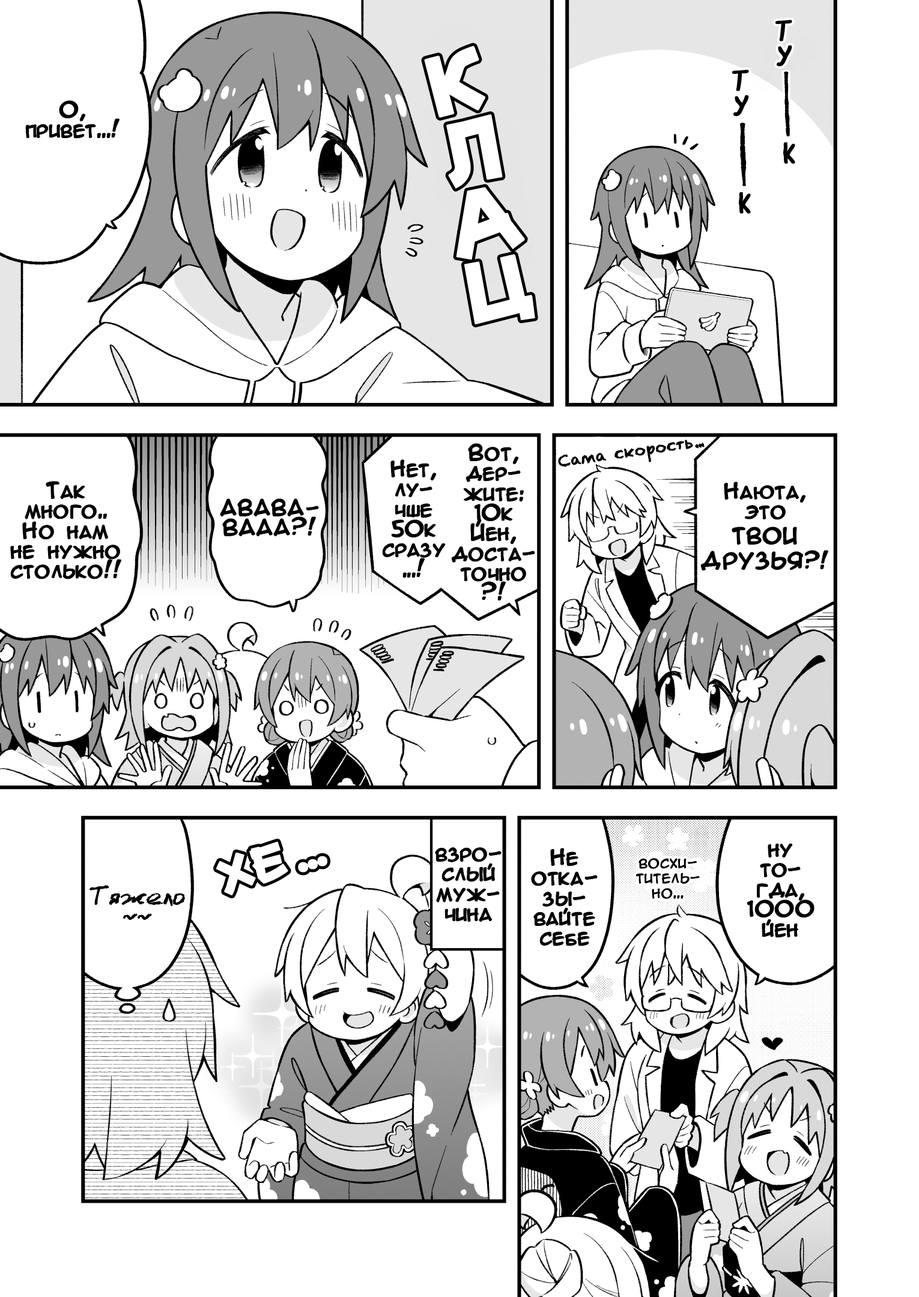
<style>
.page{position:relative;width:919px;height:1297px;background:#ffffff}
.page>*{position:absolute;margin:0}
.t1{font:30px/25px "SuperWebcomicBros.Rusbyyakustick";color:#000000;font-weight:bold}
.t2{font:70.1px "Mauryssel-Bold";letter-spacing:0.01em;color:#ffffff;font-weight:bold}
.t3{font:20px/20px "AnimeAcev3";color:#000000;font-weight:bold}
.t4{font:30px "SuperWebcomicBros.Rusbyyakustick";color:#000000;font-weight:bold}
.t5{font:15px "Chalkduster";color:#000000;font-weight:bold}
.t6{font:20px/25px "AnimeAcev3";color:#000000;font-weight:bold}
.t7{font:15px/15px "AnimeAcev3";color:#000000;font-weight:bold}
.t8{font:20px/20px "LCChalk";color:#000000;font-weight:bold}
</style>
<div class="page">
<p class="t1" style="left:775px;top:20px;width:17px;height:47px;text-align:center">Т<br>у</p>
<p class="t2" style="left:424px;top:46px;width:111px;height:279px;rotate:-12deg">Клац</p>
<p class="t1" style="left:732px;top:70px;width:17px;height:47px;text-align:center">Т<br>у</p>
<p class="t3" style="left:26px;top:101px;width:94px;height:37px;text-align:center">О,<br>привет...!</p>
<p class="t4" style="left:783px;top:142px;width:12px;height:22px">к</p>
<p class="t4" style="left:739px;top:192px;width:12px;height:22px">к</p>
<p class="t3" style="left:452px;top:444px;width:83px;height:157px;text-align:center">Вот,<br>дер-<br>жите:<br>10к<br>Йен,<br>доста-<br>точно<br>?!</p>
<p class="t5" style="left:558px;top:440px;width:147px;height:27px;rotate:-8deg">Сама скорость...</p>
<p class="t3" style="left:383px;top:460px;width:62px;height:118px;text-align:center">Нет,<br>лу-<br>чше<br>50к<br>сразу<br>...!</p>
<p class="t3" style="left:11px;top:482px;width:110px;height:97px;text-align:center">Так<br>много..<br>Но нам<br>не нужно<br>столько!!</p>
<p class="t6" style="left:701px;top:482px;width:127px;height:89px;text-align:center"><span class="t3">Наюта,<br>это<br></span>ТВОИ<br>ДРУЗЬЯ?!</p>
<p class="t3" style="left:220px;top:499px;width:98px;height:37px;text-align:center">АВАВА-<br>ВААА?!</p>
<p class="t3" style="left:747px;top:844px;width:67px;height:94px;text-align:center">ну<br>то-<br>гда,<br>1000<br>йен</p>
<p class="t3" style="left:435px;top:848px;width:66px;height:74px;text-align:center">взро-<br>слый<br>муж-<br>чина</p>
<p class="t3" style="left:532px;top:849px;width:65px;height:97px;text-align:center">Не<br>отка-<br>зы-<br>вайте<br>себе</p>
<p class="t7" style="left:636px;top:858px;width:64px;height:41px;text-align:center">восхи-<br>титель-<br>но...</p>
<p class="t8" style="left:90px;top:885px;width:95px;height:35px;text-align:center">Тяжело<br>~~</p>
</div>
